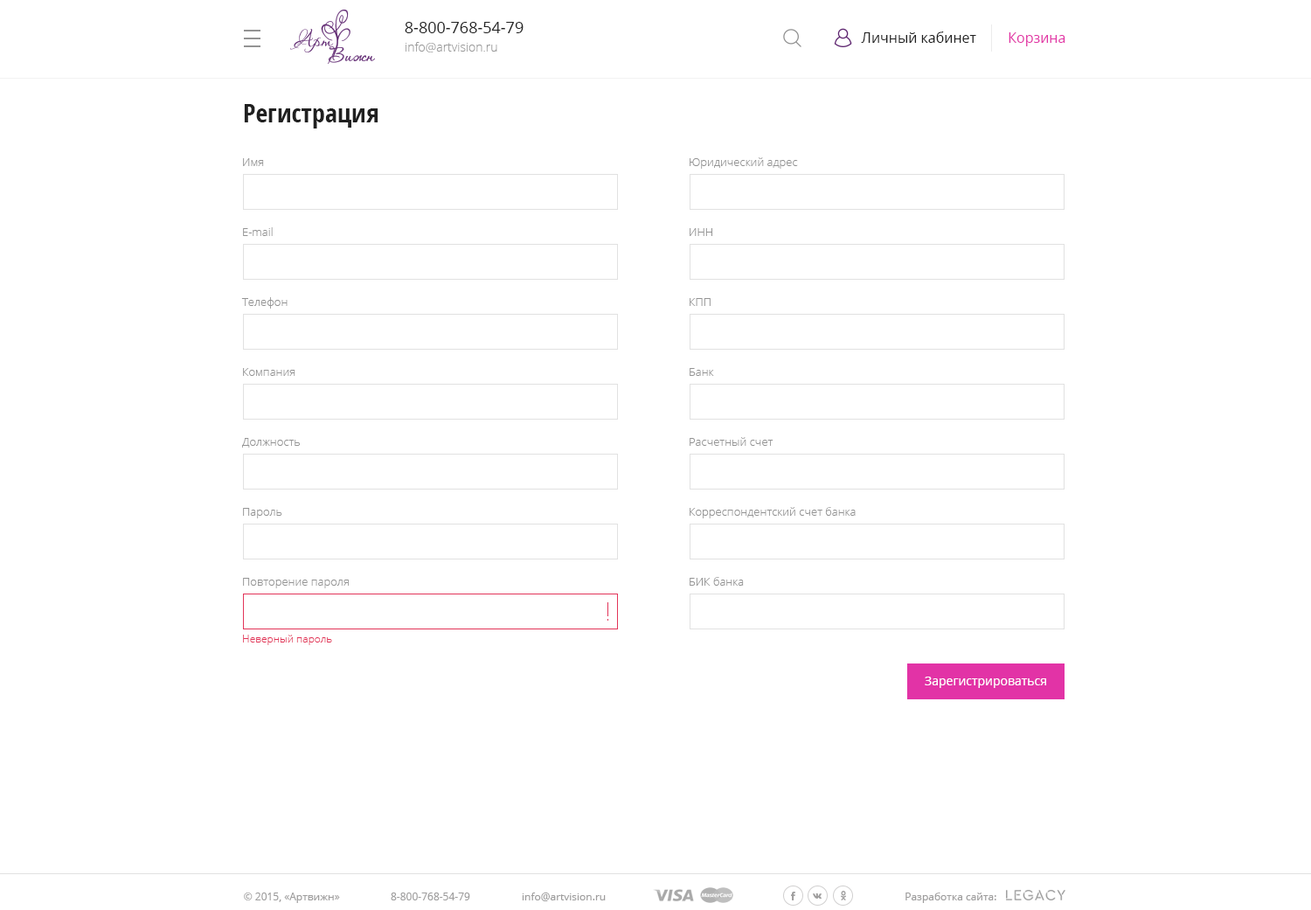
<style>
.page{position:relative;width:1311px;height:910px;background:#ffffff}
.page>*{position:absolute;margin:0}
.t1{font:15.7px "OpenSans";color:#202020}
.t2{font:12.2px "OpenSans-Light";color:#999999}
.t3{font:14px "OpenSans";color:#202020}
.t4{font:14px "OpenSans";color:#e233a6}
.t5{font:26.2px "OpenSans-CondensedBold";color:#202020}
.t6{font:11.4px "OpenSans-Light";color:#939393}
.t7{font:10.5px "OpenSans-Light";color:#e23358}
.t8{font:12.2px "OpenSans";color:#ffffff}
.t9{font:10.5px "OpenSans";color:#9e9d9d}
</style>
<div class="page">
<p class="t1" style="left:405px;top:22px;width:118px;height:11px">8-800-768-54-79</p>
<p class="t2" style="left:405px;top:42px;width:92px;height:10px">info@artvision.ru</p>
<p class="t3" style="left:861px;top:31px;width:115px;height:12px">Личный кабинет</p>
<p class="t4" style="left:1008px;top:32px;width:57px;height:14px">Корзина</p>
<p class="t5" style="left:244px;top:104px;width:134px;height:24px">Регистрация</p>
<p class="t6" style="left:243px;top:158px;width:21px;height:8px">Имя</p>
<p class="t6" style="left:689px;top:157px;width:109px;height:12px">Юридический адрес</p>
<p class="t6" style="left:243px;top:227px;width:30px;height:9px">E-mail</p>
<p class="t6" style="left:689px;top:228px;width:23px;height:8px">ИНН</p>
<p class="t6" style="left:241px;top:297px;width:47px;height:11px">Телефон</p>
<p class="t6" style="left:689px;top:298px;width:21px;height:8px">КПП</p>
<p class="t6" style="left:243px;top:368px;width:52px;height:8px">Компания</p>
<p class="t6" style="left:689px;top:368px;width:25px;height:8px">Банк</p>
<p class="t6" style="left:242px;top:438px;width:58px;height:9px">Должность</p>
<p class="t6" style="left:689px;top:437px;width:84px;height:9px">Расчетный счет</p>
<p class="t6" style="left:243px;top:508px;width:39px;height:10px">Пароль</p>
<p class="t6" style="left:689px;top:507px;width:167px;height:11px">Корреспондентский счет банка</p>
<p class="t6" style="left:243px;top:578px;width:106px;height:10px">Повторение пароля</p>
<p class="t6" style="left:689px;top:577px;width:55px;height:8px">БИК банка</p>
<p class="t7" style="left:243px;top:634px;width:89px;height:11px">Неверный пароль</p>
<p class="t8" style="left:925px;top:676px;width:121px;height:12px">Зарегистрироваться</p>
<p class="t9" style="left:244px;top:892px;width:96px;height:11px">© 2015, «Артвижн»</p>
<p class="t9" style="left:391px;top:892px;width:79px;height:8px">8-800-768-54-79</p>
<p class="t9" style="left:522px;top:892px;width:84px;height:9px">info@artvision.ru</p>
<p class="t9" style="left:905px;top:892px;width:91px;height:11px">Разработка сайта:</p>
</div>
